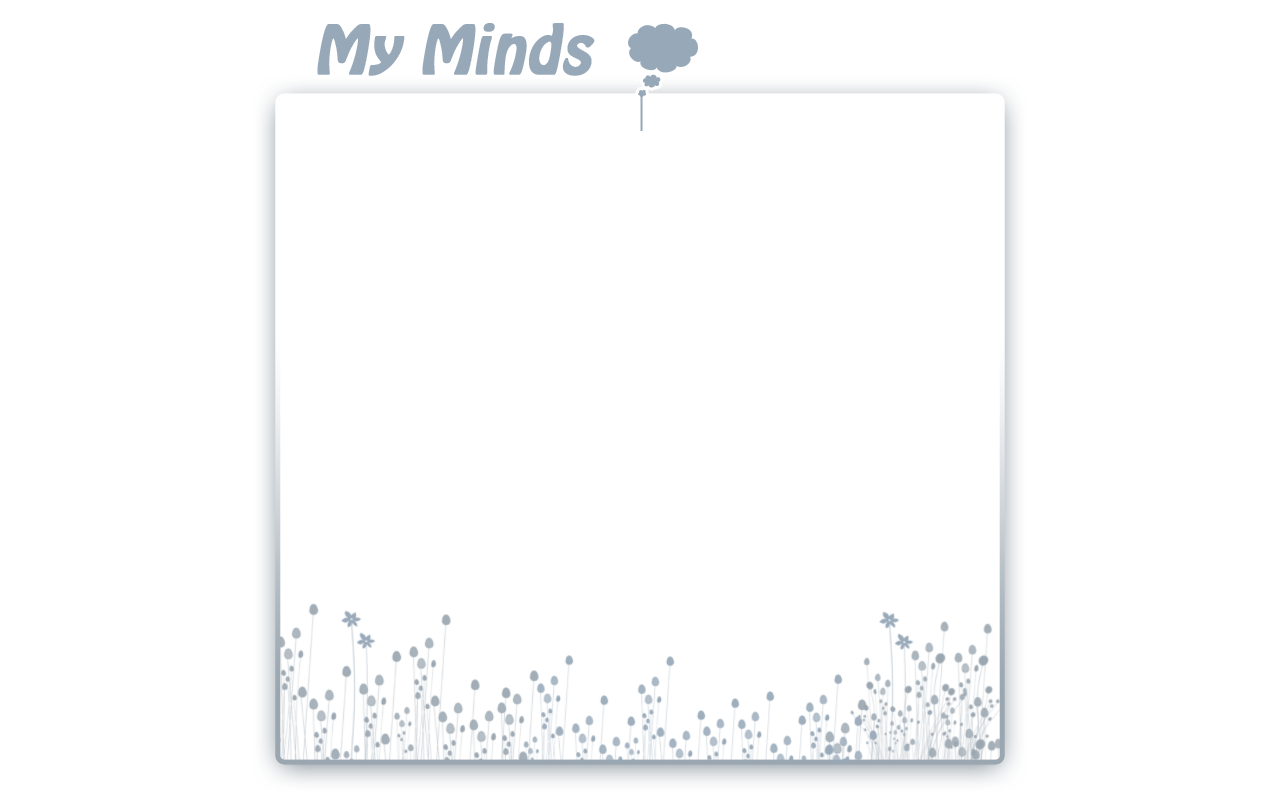
<style>
.page{position:relative;width:1280px;height:800px;background:#ffffff}
.page>*{position:absolute;margin:0}
.t1{font:60px "HoboStd";color:#97a8b8;font-weight:bold;font-style:italic}
</style>
<div class="page">
<p class="t1" style="left:317px;top:23px;width:278px;height:53px">My Minds</p>
</div>
